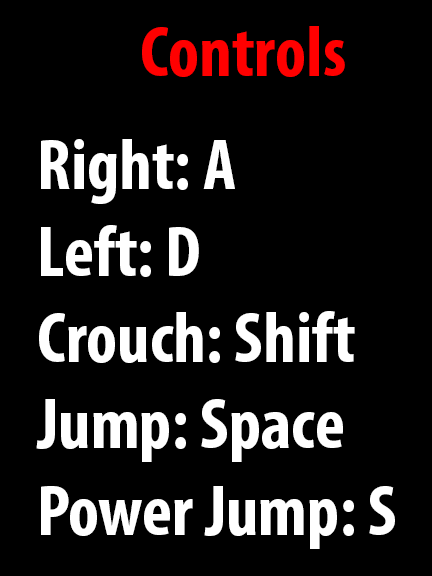
<style>
.page{position:relative;width:432px;height:576px;background:#000000}
.page>*{position:absolute;margin:0}
.t1{font:72px "MyriadPro-BoldCond";color:#ff0000}
.t2{font:72px "MyriadPro-BoldCond";color:#ffffff}
</style>
<div class="page">
<p class="t1" style="left:142px;top:26px;width:203px;height:51px">Controls</p>
<p class="t2" style="left:36px;top:139px;width:359px;height:410px">Right: A<br>Left: D<br>Crouch: Shift<br>Jump: Space<br>Power Jump: S</p>
</div>
